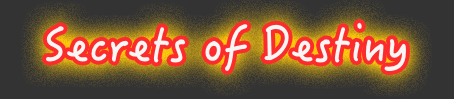
<style>
.page{position:relative;width:454px;height:99px;background:#333333}
.page>*{position:absolute;margin:0}
.t1{font:48px "HanziPenTC-W5";color:#f8f5f5}
</style>
<div class="page">
<p class="t1" style="left:46px;top:22px;width:360px;height:49px">Secrets of Destiny</p>
</div>
